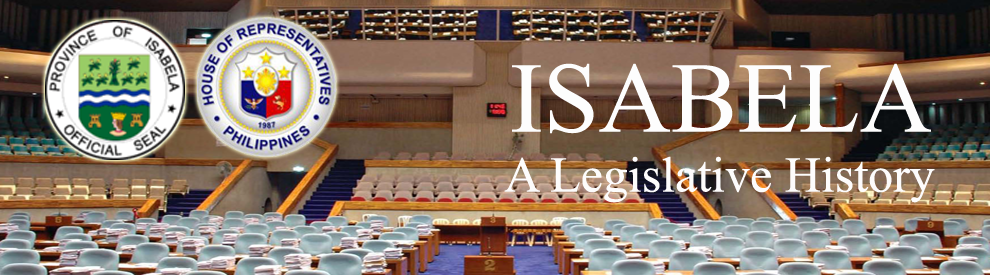
<style>
.page{position:relative;width:990px;height:275px}
.page>*{position:absolute;margin:0}
.t1{font:50px "TimesNewRomanPSMT";color:#fdfcfc}
.t2{font:100px "TimesNewRomanPSMT";color:#fdfdfd}
</style>
<div class="page">
<p class="t1" style="left:504px;top:63px;width:431px;height:140px;text-align:center"><span class="t2">ISABELA<br></span>A Legislative History</p>
</div>
